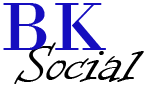
<style>
.page{position:relative;width:146px;height:85px;background:#ffffff}
.page>*{position:absolute;margin:0}
.t1{font:72px "BodoniMT";color:#150dbf}
.t2{font:60px "InformalRoman-Regular";color:#000000}
</style>
<div class="page">
<p class="t1" style="left:3px;top:3px;width:103px;height:47px">BK</p>
<p class="t2" style="left:14px;top:42px;width:130px;height:42px">Social</p>
</div>
